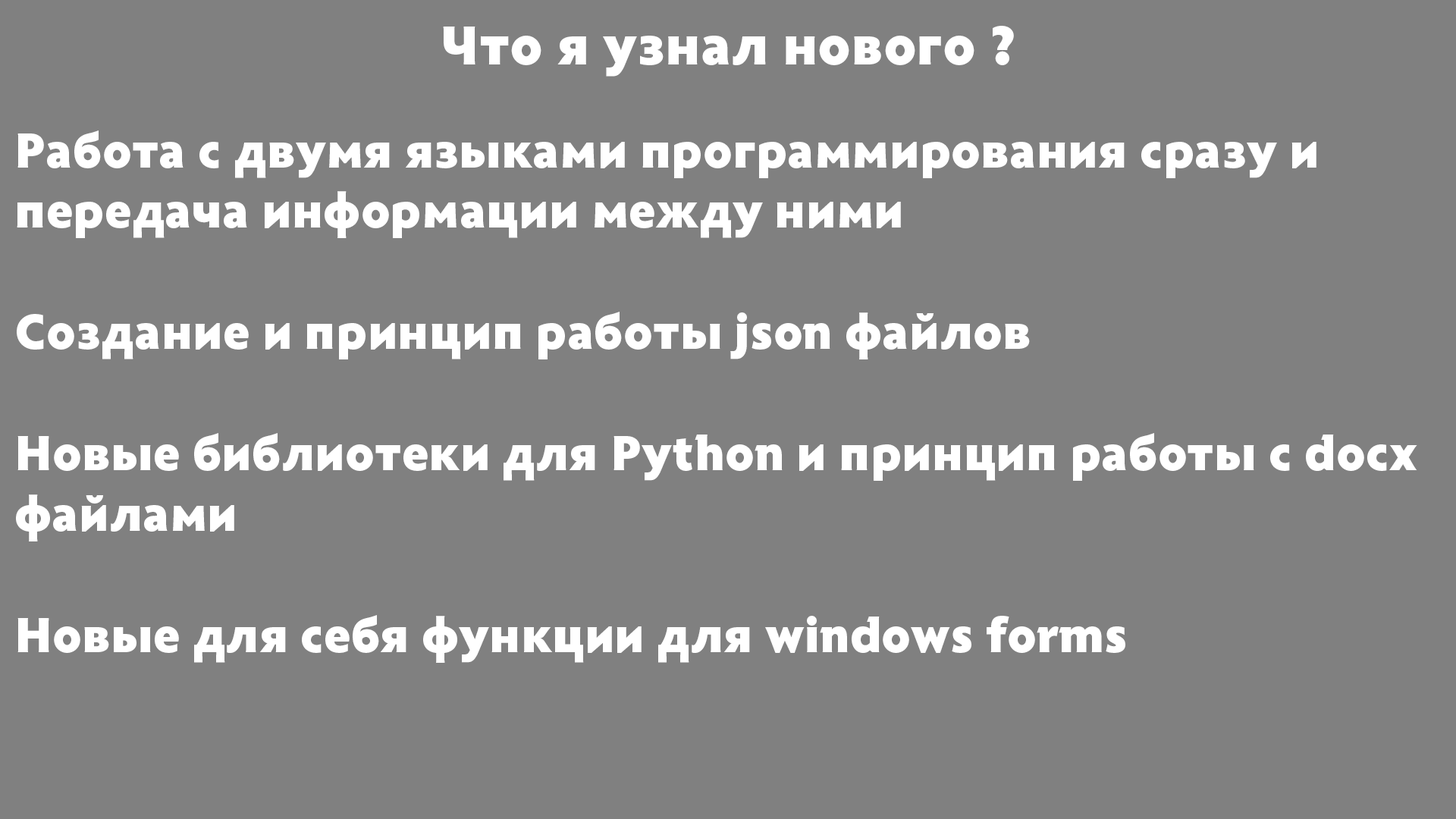
<style>
.page{position:relative;width:1456px;height:819px;background:#808080}
.page>*{position:absolute;margin:0}
.t1{font:56.9px "Radiance-Black";color:#ffffff}
.t2{font:50.6px "Radiance-Black";color:#ffffff}
</style>
<div class="page">
<p class="t1" style="left:443px;top:26px;width:571px;height:51px">Что я узнал нового ?</p>
<p class="t2" style="left:16px;top:130px;width:1401px;height:533px">Работа с двумя языками программирования сразу и<br>передача информации между ними<br><br>Создание и принцип работы json файлов<br><br>Новые библиотеки для Python и принцип работы с docx <br>файлами<br><br>Новые для себя функции для windows forms</p>
</div>
